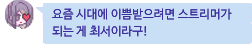
<style>
.page{position:relative;width:252px;height:44px;background:#c9dff6}
.page>*{position:absolute;margin:0}
.t1{font:12px "NanumBarunGothic";color:#3c2d9c}
</style>
<div class="page">
<p class="t1" style="left:52px;top:8px;width:180px;height:12px">요즘 시대에 이쁨받으려면 스트리머가</p>
<p class="t1" style="left:52px;top:25px;width:95px;height:12px">되는 게 최서이라구!</p>
</div>
